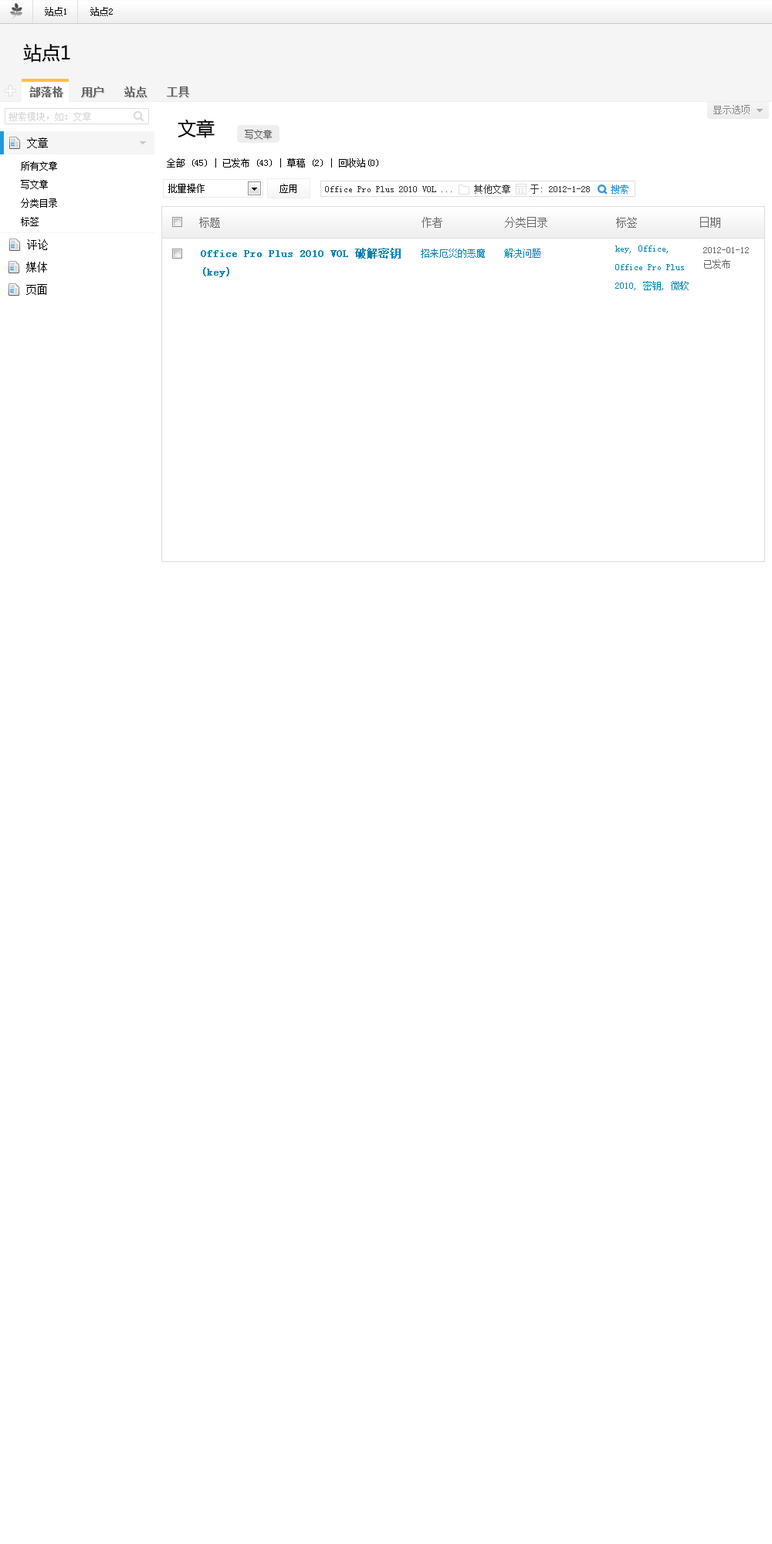
<style>
.page{position:relative;width:772px;height:1544px;background:#ffffff}
.page>*{position:absolute;margin:0}
.t1{font:9.3px "SimSun";color:#000000}
.t2{font:18.5px "MicrosoftYaHei";color:#000000}
.t3{font:10.8px "SimSun";color:#666666;font-weight:bold}
.t4{font:9.3px "SimSun";color:#d5d5d5}
.t5{font:9.3px "SimSun";color:#888888}
.t6{font:10.8px "SimSun";color:#000000}
.t7{font:9.3px "SimSun";color:#666666}
.t8{font:9.3px/18.5px "SimSun";color:#000000}
.t9{font:9.3px "SimSun";color:#333333}
.t10{font:9.3px "SimSun";color:#2298dc}
.t11{font:10.8px "SimSun";color:#666666}
.t12{font:9.3px/18.5px "SimSun";color:#0084b4}
.t13{font:10.8px/18.5px "SimSun";color:#0084b4;font-weight:bold}
.t14{font:9.3px "SimSun";color:#0084b4}
.t15{font:9.3px/13.9px "SimSun";color:#666666}
</style>
<div class="page">
<p class="t1" style="left:45px;top:7px;width:21px;height:9px">站点1</p>
<p class="t1" style="left:90px;top:7px;width:23px;height:9px">站点2</p>
<p class="t2" style="left:23px;top:44px;width:47px;height:19px">站点1</p>
<p class="t3" style="left:29px;top:86px;width:34px;height:11px">部落格</p>
<p class="t3" style="left:81px;top:86px;width:22px;height:11px">用户</p>
<p class="t3" style="left:124px;top:86px;width:23px;height:11px">站点</p>
<p class="t3" style="left:167px;top:86px;width:22px;height:11px">工具</p>
<p class="t4" style="left:8px;top:112px;width:83px;height:9px">搜索模块，如：文章</p>
<p class="t5" style="left:713px;top:105px;width:37px;height:9px">显示选项</p>
<p class="t2" style="left:178px;top:119px;width:37px;height:19px">文章</p>
<p class="t6" style="left:27px;top:137px;width:21px;height:11px">文章</p>
<p class="t7" style="left:245px;top:130px;width:27px;height:9px">写文章</p>
<p class="t8" style="left:21px;top:161px;width:36px;height:65px">所有文章<br>写文章<br>分类目录<br>标签</p>
<p class="t1" style="left:167px;top:158px;width:211px;height:10px">全部 (45) | 已发布 (43) | 草稿 (2) | 回收站(0)</p>
<p class="t1" style="left:280px;top:184px;width:17px;height:9px">应用</p>
<p class="t9" style="left:474px;top:185px;width:36px;height:9px">其他文章</p>
<p class="t9" style="left:530px;top:185px;width:60px;height:9px">于: 2012-1-28</p>
<p class="t10" style="left:611px;top:185px;width:18px;height:9px">搜索</p>
<p class="t9" style="left:325px;top:186px;width:127px;height:6px">Office Pro Plus 2010 VOL ...</p>
<p class="t11" style="left:199px;top:217px;width:521px;height:11px">标题        作者   分类目录   标签   日期</p>
<p class="t6" style="left:27px;top:239px;width:21px;height:11px">评论</p>
<p class="t12" style="left:615px;top:246px;width:74px;height:44px">key, Office, Office Pro Plus 2010, 密钥, 微软</p>
<p class="t13" style="left:201px;top:248px;width:200px;height:29px">Office Pro Plus 2010 VOL 破解密钥<br>(key)</p>
<p class="t14" style="left:421px;top:249px;width:64px;height:9px">招来厄災的恶魔</p>
<p class="t14" style="left:504px;top:249px;width:37px;height:9px">解决问题</p>
<p class="t15" style="left:703px;top:247px;width:46px;height:22px">2012-01-12<br>已发布</p>
<p class="t6" style="left:26px;top:262px;width:21px;height:11px">媒体</p>
<p class="t6" style="left:26px;top:284px;width:21px;height:11px">页面</p>
</div>
